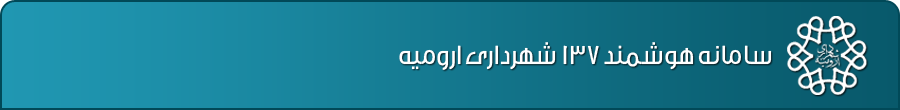
<style>
.page{position:relative;width:900px;height:110px}
.page>*{position:absolute;margin:0}
.t1{font:27.9px "Mj_Flow";letter-spacing:-0.001em;color:#ffffff}
</style>
<div class="page">
<p class="t1" style="left:399px;top:42px;width:373px;height:28px">سامانه هوشمند 137 شهرداری ارومیه</p>
</div>
